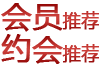
<style>
.page{position:relative;width:100px;height:64px;background:#ffffff}
.page>*{position:absolute;margin:0}
.t1{font:30px "MicrosoftYaHei";color:#ba3530;font-weight:bold}
.t2{font:18px "MicrosoftYaHei";color:#ba3530;font-weight:bold}
</style>
<div class="page">
<p class="t1" style="left:1px;top:3px;width:98px;height:29px">会员<span class="t2">推荐</span></p>
<p class="t1" style="left:1px;top:34px;width:98px;height:31px">约会<span class="t2">推荐</span></p>
</div>
